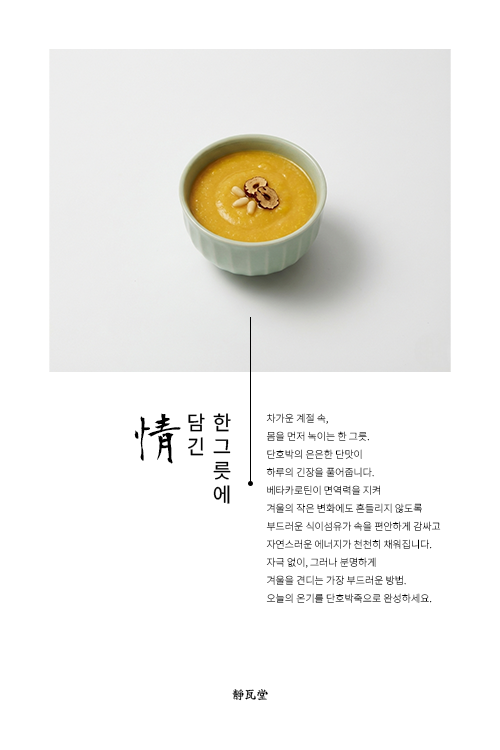
<style>
.page{position:relative;width:500px;height:750px;background:#ffffff}
.page>*{position:absolute;margin:0}
.t1{font:60px "KouzanBrushFontOTF";color:#000000;text-transform:uppercase}
.t2{font:20px/24px "NotoSansKR-Regular";color:#000000;text-transform:uppercase}
.t3{font:10px/18px "NotoSansKR-Thin";color:#000000;text-transform:uppercase}
.t4{font:12px "YujiMai-Regular";color:#000000;text-transform:uppercase}
</style>
<div class="page">
<p class="t1" style="left:134px;top:413px;width:47px;height:51px">情</p>
<p class="t2" style="left:188px;top:413px;width:17px;height:43px">담<br>긴</p>
<p class="t2" style="left:213px;top:413px;width:18px;height:91px">한<br>그<br>릇<br>에</p>
<p class="t3" style="left:266px;top:413px;width:175px;height:190px">차가운 계절 속,<br>몸을 먼저 녹이는 한 그릇.<br>단호박의 은은한 단맛이<br>하루의 긴장을 풀어줍니다.<br>베타카로틴이 면역력을 지켜<br>겨울의 작은 변화에도 흔들리지 않도록<br>부드러운 식이섬유가 속을 편안하게 감싸고<br>자연스러운 에너지가 천천히 채워집니다.<br>자극 없이, 그러나 분명하게<br>겨울을 견디는 가장 부드러운 방법.<br>오늘의 온기를 단호박죽으로 완성하세요.</p>
<p class="t4" style="left:232px;top:689px;width:36px;height:12px">靜瓦堂</p>
</div>
